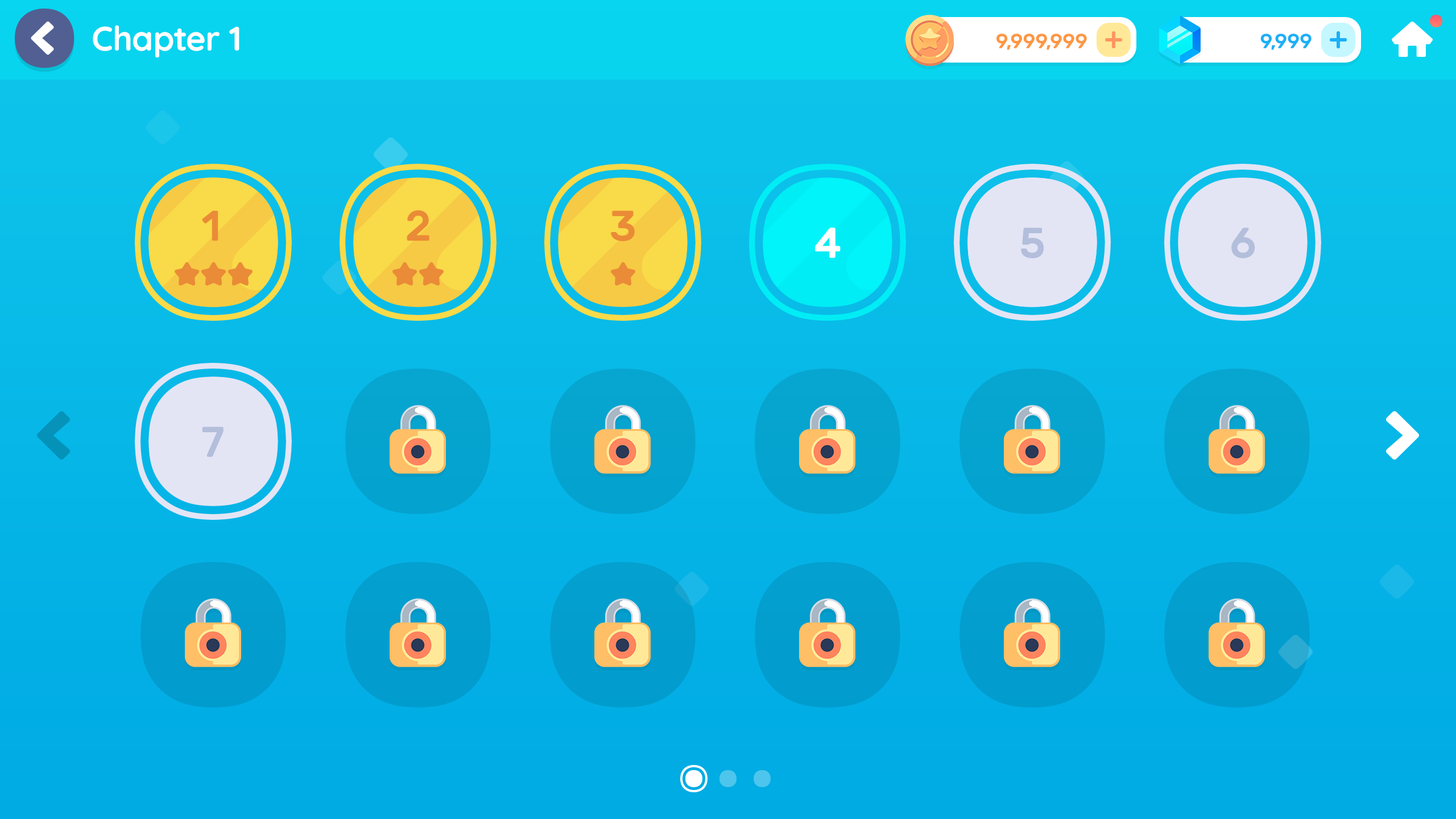
<style>
.page{position:relative;width:1456px;height:819px}
.page>*{position:absolute;margin:0}
.t1{font:34.1px "Quicksand-Bold";letter-spacing:-0.01em;color:#ffffff}
.t2{font:20.5px "Rubik-Medium";letter-spacing:-0.01em;color:#fd9744;text-transform:uppercase}
.t3{font:20.5px "Rubik-Medium";letter-spacing:-0.01em;color:#1cb0f6;text-transform:uppercase}
.t4{font:42.7px "Rubik-Medium";color:#ea8b37}
.t5{font:42.7px "Rubik-Medium";color:#ffffff}
.t6{font:42.7px "Rubik-Medium";color:#b3bedb}
</style>
<div class="page">
<p class="t1" style="left:93px;top:25px;width:146px;height:32px">Chapter 1</p>
<p class="t2" style="left:996px;top:34px;width:91px;height:16px">9,999,999</p>
<p class="t3" style="left:1260px;top:34px;width:52px;height:16px">9,999</p>
<p class="t4" style="left:407px;top:210px;width:22px;height:31px">2</p>
<p class="t4" style="left:202px;top:210px;width:16px;height:31px">1</p>
<p class="t4" style="left:611px;top:210px;width:24px;height:31px">3</p>
<p class="t5" style="left:815px;top:227px;width:26px;height:31px">4</p>
<p class="t6" style="left:1021px;top:227px;width:23px;height:31px">5</p>
<p class="t6" style="left:1231px;top:227px;width:24px;height:31px">6</p>
<p class="t6" style="left:202px;top:427px;width:22px;height:30px">7</p>
</div>
